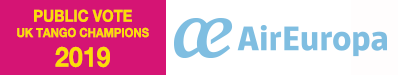
<style>
.page{position:relative;width:398px;height:75px;background:#ffffff}
.page>*{position:absolute;margin:0}
.t1{font:12.5px/15.3px "HelveticaNeue-Bold";color:#fcdd06;scale:0.9 1}
.t2{font:16.5px/15.3px "HelveticaNeue-Bold";color:#fcdd06;scale:0.9 1}
.t3{font:27.7px/29.7px "HelveticaNeue-Bold";color:#fcdd06;scale:0.9 1}
</style>
<div class="page">
<p class="t1" style="left:17px;top:9px;width:132px;height:59px;text-align:center"><span class="t2">PUBLIC VOTE<br></span>UK TANGO CHAMPIONS<br><span class="t3">2019</span></p>
</div>
